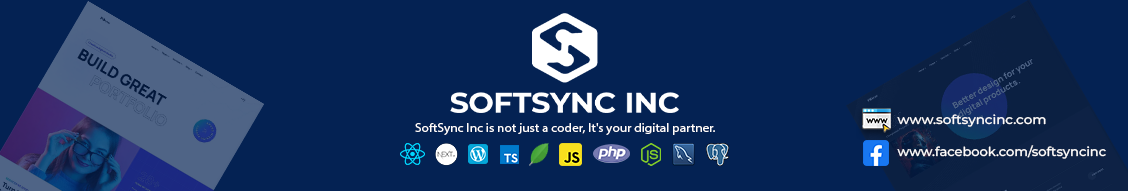
<style>
.page{position:relative;width:1128px;height:191px;background:#042253}
.page>*{position:absolute;margin:0}
.t1{font:12.5px "MyriadPro-Regular";color:#fffefe;scale:1.06 1}
.t2{font:12.6px "Montserrat-Medium";color:#fffefe;scale:1.06 1}
.t3{font:12.6px "Montserrat-Medium";color:#fffefe;scale:1.03 1}
</style>
<div class="page">
<p class="t1" style="left:415px;top:123px;width:300px;height:12px">SoftSync Inc is not just a coder, It's your digital partner.</p>
<p class="t2" style="left:897px;top:114px;width:149px;height:13px">www.softsyncinc.com</p>
<p class="t3" style="left:897px;top:145px;width:209px;height:14px">www.facebook.com/softsyncinc</p>
</div>
